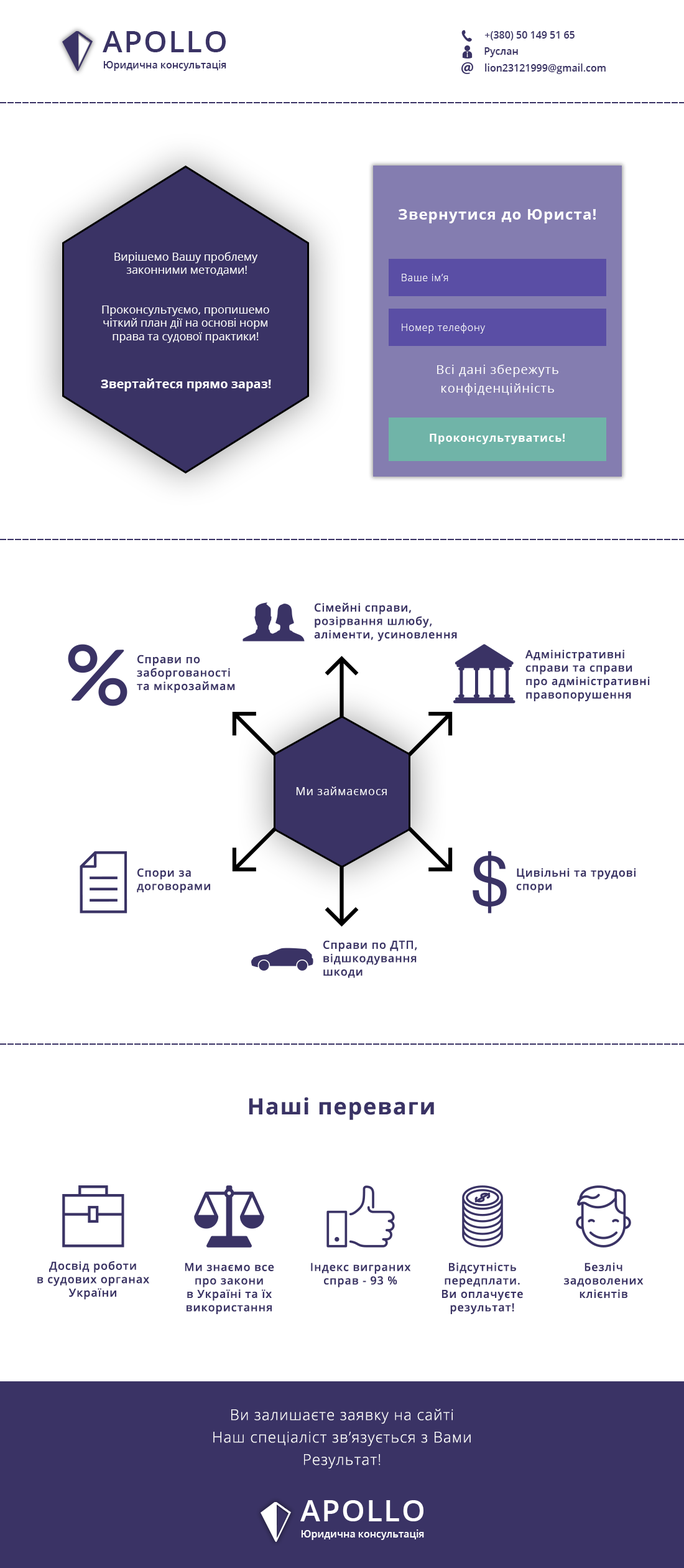
<style>
.page{position:relative;width:684px;height:1568px;background:#ffffff}
.page>*{position:absolute;margin:0}
.t1{font:29.9px "OpenSans-SemiBold";letter-spacing:0.05em;color:#3a3365}
.t2{font:10px "OpenSans-SemiBold";color:#3a3365}
.t3{font:14.9px "OpenSans-Bold";letter-spacing:0.05em;color:#ffffff}
.t4{font:11.2px "OpenSans-Regular";color:#ffffff}
.t5{font:10px "OpenSans-Light";letter-spacing:0.05em;color:#ffffff}
.t6{font:12.4px/18.7px "OpenSans-Regular";letter-spacing:0.05em;color:#ffffff}
.t7{font:12.4px "OpenSans-Bold";color:#ffffff}
.t8{font:11.2px "OpenSans-Bold";letter-spacing:0.05em;color:#ffffff}
.t9{font:11.2px "OpenSans-SemiBold";letter-spacing:0.05em;color:#3a3365}
.t10{font:11.2px "OpenSans-Regular";letter-spacing:0.05em;color:#ffffff}
.t11{font:22.4px "OpenSans-Bold";letter-spacing:0.05em;color:#3a3365}
.t12{font:14.9px/22.4px "OpenSans-Light";letter-spacing:0.05em;color:#ffffff}
.t13{font:29.9px "OpenSans-SemiBold";letter-spacing:0.05em;color:#ffffff}
.t14{font:10px "OpenSans-SemiBold";color:#ffffff}
</style>
<div class="page">
<p class="t1" style="left:103px;top:31px;width:123px;height:21px">APOLLO</p>
<p class="t2" style="left:485px;top:31px;width:90px;height:9px">+(380) 50 149 51 65</p>
<p class="t2" style="left:485px;top:47px;width:33px;height:10px">Руслан</p>
<p class="t2" style="left:103px;top:60px;width:123px;height:11px">Юридична консультація</p>
<p class="t2" style="left:485px;top:63px;width:121px;height:11px">lion23121999@gmail.com</p>
<p class="t3" style="left:399px;top:209px;width:197px;height:14px">Звернутися до Юриста!</p>
<p class="t4" style="left:114px;top:252px;width:144px;height:24px;text-align:center">Вирішемо Вашу проблему <br>законними методами!</p>
<p class="t5" style="left:402px;top:274px;width:47px;height:7px">Ваше ім’я</p>
<p class="t4" style="left:102px;top:306px;width:167px;height:37px;text-align:center">Проконсультуємо, пропишемо чіткий план дії на основі норм права та судової практики!</p>
<p class="t5" style="left:402px;top:323px;width:83px;height:11px">Номер телефону</p>
<p class="t6" style="left:437px;top:365px;width:122px;height:31px;text-align:center">Всі дані збережуть <br>конфіденційність</p>
<p class="t7" style="left:101px;top:378px;width:170px;height:13px">Звертайтеся прямо зараз!</p>
<p class="t8" style="left:430px;top:434px;width:136px;height:10px">Проконсультуватись!</p>
<p class="t9" style="left:314px;top:602px;width:143px;height:40px">Сімейні справи,<br>розірвання шлюбу, аліменти, усиновлення</p>
<p class="t9" style="left:526px;top:650px;width:124px;height:51px">Адміністративні справи та справи про адміністративні правопорушення</p>
<p class="t9" style="left:137px;top:655px;width:98px;height:38px">Справи по <br>заборгованості та мікрозаймам</p>
<p class="t10" style="left:296px;top:786px;width:91px;height:9px">Ми займаємося</p>
<p class="t9" style="left:137px;top:868px;width:73px;height:25px">Спори за договорами</p>
<p class="t9" style="left:516px;top:868px;width:121px;height:25px">Цивільні та трудові спори</p>
<p class="t9" style="left:324px;top:940px;width:94px;height:38px">Справи по ДТП,<br>відшкодування шкоди</p>
<p class="t11" style="left:249px;top:1097px;width:185px;height:23px">Наші переваги</p>
<p class="t9" style="left:37px;top:1261px;width:112px;height:39px;text-align:center">Досвід роботи <br>в судових органах України</p>
<p class="t9" style="left:185px;top:1262px;width:89px;height:52px;text-align:center">Ми знаємо все <br>про закони <br>в Україні та їх <br>використання</p>
<p class="t9" style="left:311px;top:1262px;width:100px;height:25px;text-align:center">Індекс виграних справ - 93 %</p>
<p class="t9" style="left:442px;top:1262px;width:81px;height:52px;text-align:center">Відсутність <br>передплати. <br>Ви оплачуєте <br>результат!</p>
<p class="t9" style="left:564px;top:1262px;width:80px;height:37px;text-align:center">Безліч <br>задоволених клієнтів</p>
<p class="t12" style="left:213px;top:1409px;width:258px;height:60px;text-align:center">Ви залишаєте заявку на сайті <br>Наш спеціаліст зв’язується з Вами<br>Результат!</p>
<p class="t13" style="left:301px;top:1500px;width:123px;height:21px">APOLLO</p>
<p class="t14" style="left:301px;top:1529px;width:123px;height:11px">Юридична консультація</p>
</div>
